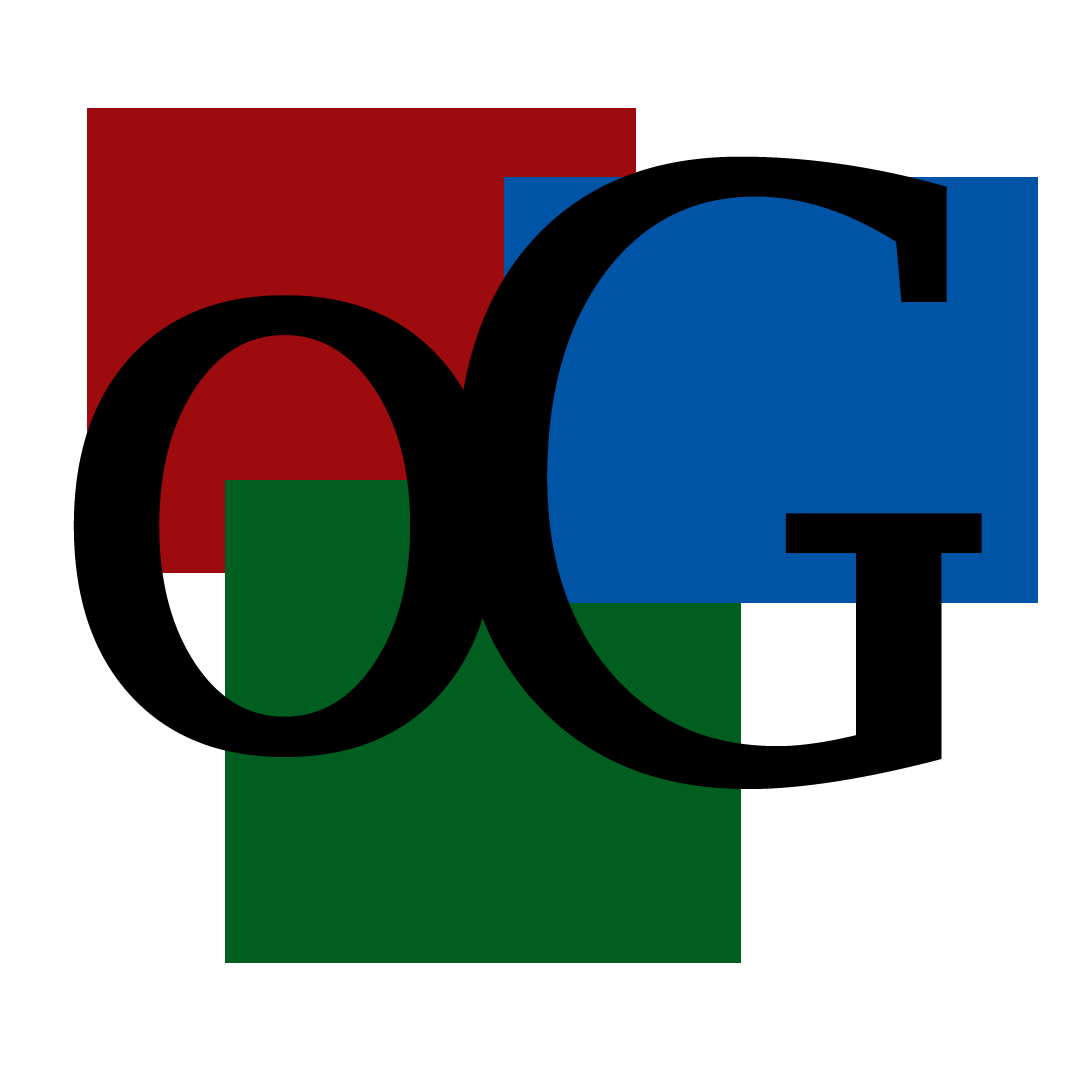
<style>
.page{position:relative;width:1080px;height:1080px;background:#ffffff}
.page>*{position:absolute;margin:0}
.t1{font:833.3px "LucidaFax";color:#000000}
</style>
<div class="page">
<p class="t1" style="left:456px;top:156px;width:526px;height:633px">G</p>
<p class="t1" style="left:73px;top:295px;width:423px;height:462px">o</p>
</div>
